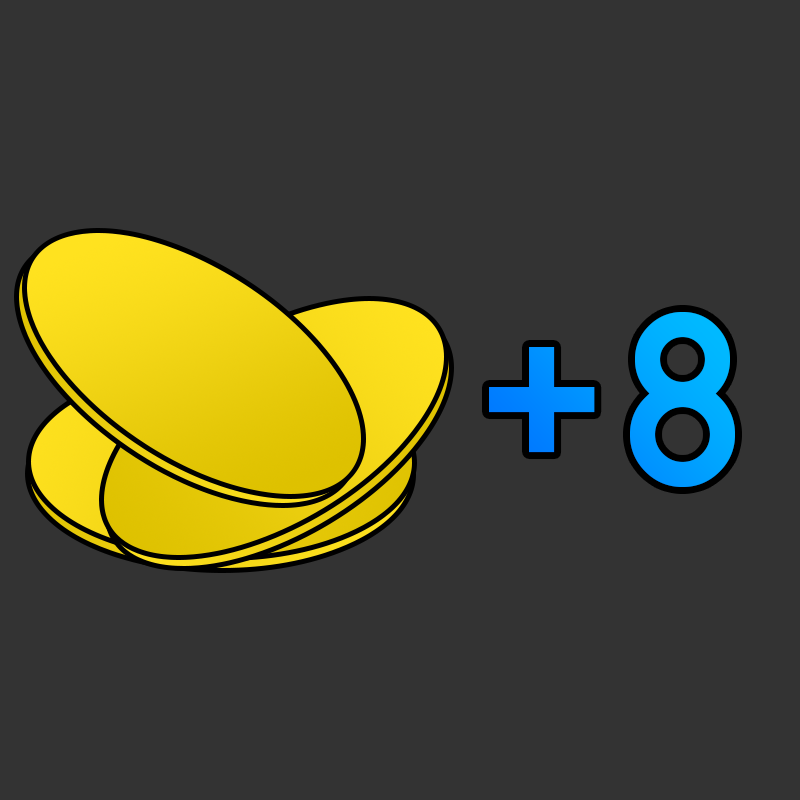
<style>
.page{position:relative;width:800px;height:800px;background:#333333}
.page>*{position:absolute;margin:0}
.t1{font:200px "Fashion-Fetish-Bold";letter-spacing:0.03em}
</style>
<div class="page">
<p class="t1" style="left:489px;top:312px;width:246px;height:175px">+8</p>
</div>
